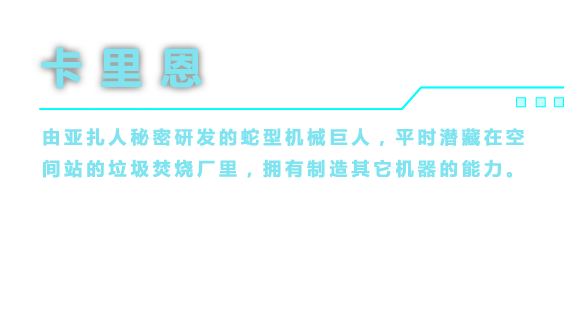
<style>
.page{position:relative;width:580px;height:312px;background:#ffffff}
.page>*{position:absolute;margin:0}
.t1{font:42px "MicrosoftYaHei-Bold";letter-spacing:0.4em;color:#80e3f0;font-weight:bold}
.t2{font:18px "MicrosoftYaHei-Bold";letter-spacing:0.2em;color:#80e3f0;font-weight:bold}
</style>
<div class="page">
<p class="t1" style="left:41px;top:47px;width:162px;height:42px">卡里恩</p>
<p class="t2" style="left:43px;top:128px;width:481px;height:50px">由亚扎人秘密研发的蛇型机械巨人，平时潜藏在空<br>间站的垃圾焚烧厂里，拥有制造其它机器的能力。</p>
</div>
